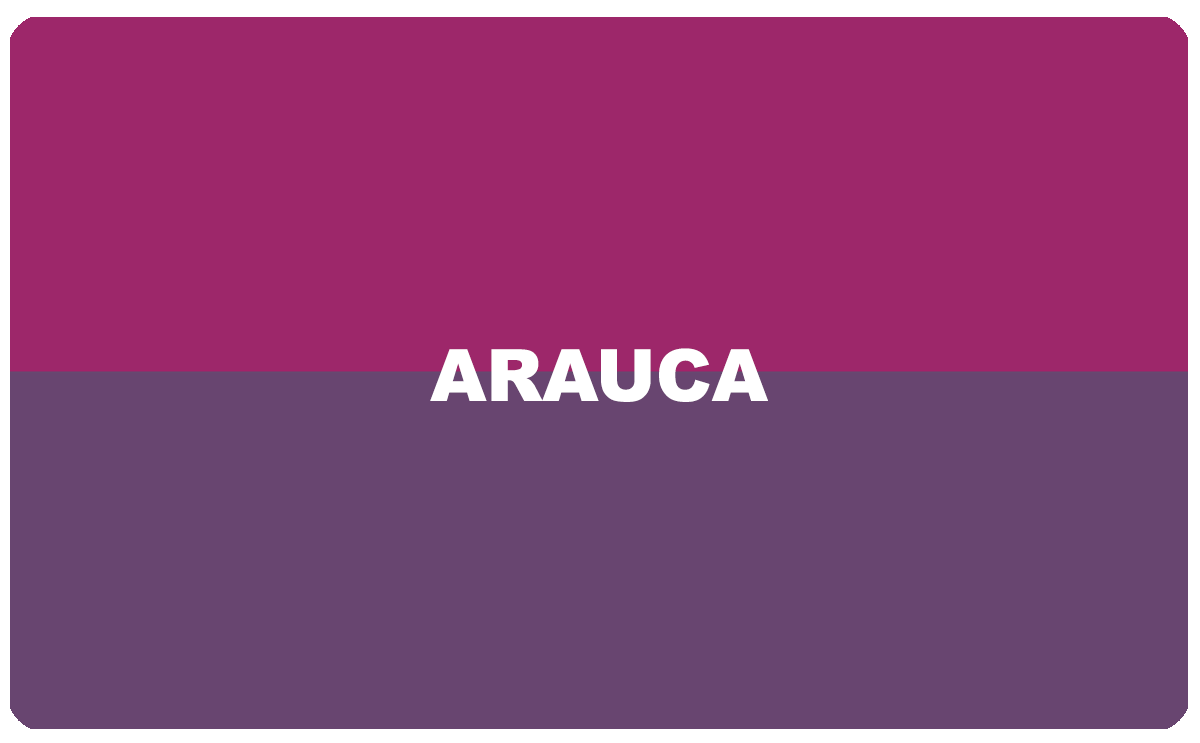
<style>
.page{position:relative;width:1200px;height:743px;background:#9d276a}
.page>*{position:absolute;margin:0}
.t1{font:72px "Arial-Black";color:#ffffff}
</style>
<div class="page">
<p class="t1" style="left:430px;top:348px;width:338px;height:54px">ARAUCA</p>
</div>
